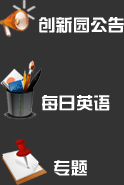
<style>
.page{position:relative;width:124px;height:185px;background:#333333}
.page>*{position:absolute;margin:0}
.t1{font:17.3px "FZZYJW--GB1-0";color:#ffffff}
</style>
<div class="page">
<p class="t1" style="left:39px;top:17px;width:85px;height:16px">创新园公告</p>
<p class="t1" style="left:42px;top:95px;width:68px;height:16px">每日英语</p>
<p class="t1" style="left:54px;top:160px;width:33px;height:16px">专题</p>
</div>
